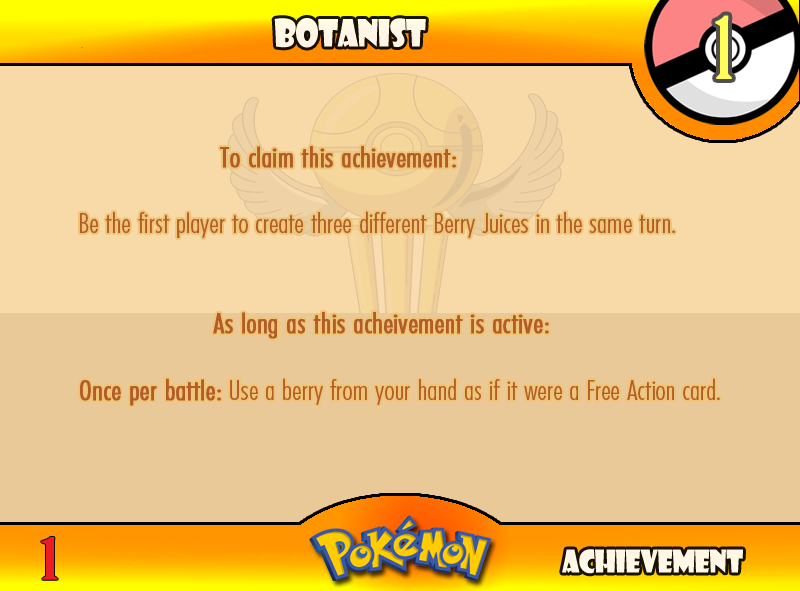
<style>
.page{position:relative;width:800px;height:591px;background:#e9c997}
.page>*{position:absolute;margin:0}
.t1{font:83.3px "BirchStd";letter-spacing:0.025em;color:#fffd59;font-weight:bold}
.t2{font:36.7px "ShowcardGothic-Reg";letter-spacing:-0.025em;color:#fff6e6;scale:0.91 1}
.t3{font:27.8px "FuturaCondensedBQ-Light";color:#b15c29;scale:1.08 1}
.t4{font:33.3px "FuturaCondensedBQ-Light";color:#b15c29;font-weight:bold;scale:1.08 1}
.t5{font:27.8px "FuturaCondensedBQ-Light";color:#b15c29;font-weight:bold;scale:1.08 1}
.t6{font:55.6px "BirchStd";color:#ed1c24;font-weight:bold;scale:1.5 1}
.t7{font:30.6px "ShowcardGothic-Reg";letter-spacing:-0.025em;color:#fff7e6;scale:0.91 1}
</style>
<div class="page">
<p class="t1" style="left:715px;top:15px;width:17px;height:64px">1</p>
<p class="t2" style="left:274px;top:18px;width:152px;height:30px">Botanist</p>
<p class="t3" style="left:80px;top:146px;width:640px;height:260px"><span class="t4">          <br>      </span><span class="t5">To claim this achievement:<br><br> </span>Be the first player to create three different Berry Juices in the same turn.<br><br><br>      <span class="t5">As long as this acheivement is active:<br><br> Once per battle:</span> Use a berry from your hand as if it were a Free Action card.</p>
<p class="t6" style="left:41px;top:537px;width:17px;height:43px">1</p>
<p class="t7" style="left:562px;top:549px;width:181px;height:25px">Achievement</p>
</div>
